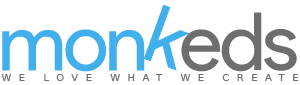
<style>
.page{position:relative;width:300px;height:85px;background:#ffffff}
.page>*{position:absolute;margin:0}
.t1{font:80.2px "ProductSans-Regular";letter-spacing:-0.04em;color:#41afeb}
.t2{font:80.2px "ProductSans-Regular";letter-spacing:-0.04em;color:#6e6e6e}
.t3{font:9.6px "DejaVuSans";letter-spacing:0.798em;color:#6e6e6e;text-transform:uppercase}
</style>
<div class="page">
<p class="t1" style="left:143px;top:4px;width:46px;height:67px;rotate:20deg">k</p>
<p class="t2" style="left:221px;top:12px;width:41px;height:60px">d</p>
<p class="t1" style="left:2px;top:30px;width:61px;height:41px">m</p>
<p class="t1" style="left:65px;top:29px;width:41px;height:43px">o</p>
<p class="t1" style="left:109px;top:30px;width:36px;height:41px">n</p>
<p class="t2" style="left:181px;top:29px;width:40px;height:43px">e</p>
<p class="t2" style="left:264px;top:29px;width:33px;height:42px">s</p>
<p class="t3" style="left:1px;top:74px;width:298px;height:7px">We love what we create</p>
</div>
